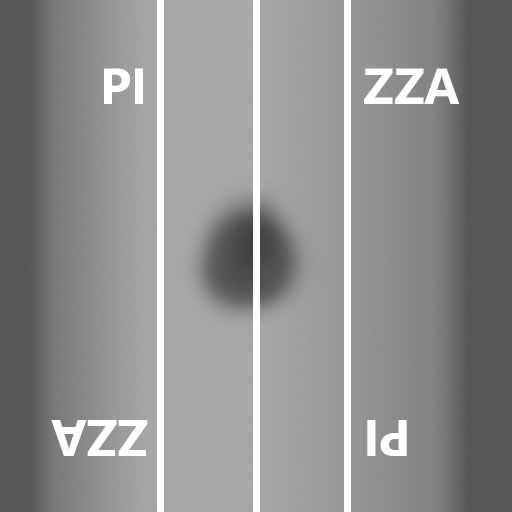
<style>
.page{position:relative;width:512px;height:512px}
.page>*{position:absolute;margin:0}
.t1{font:50.8px "SegoeUI-Bold";color:#ffffff}
.t2{font:50.1px "SegoeUI-Bold";color:#ffffff}
</style>
<div class="page">
<p class="t1" style="left:104px;top:68px;width:39px;height:36px">PI</p>
<p class="t1" style="left:364px;top:68px;width:96px;height:36px">ZZA</p>
<p class="t2" style="left:51px;top:420px;width:97px;height:36px;rotate:180deg">ZZA</p>
<p class="t2" style="left:367px;top:420px;width:40px;height:36px;rotate:180deg">PI</p>
</div>
